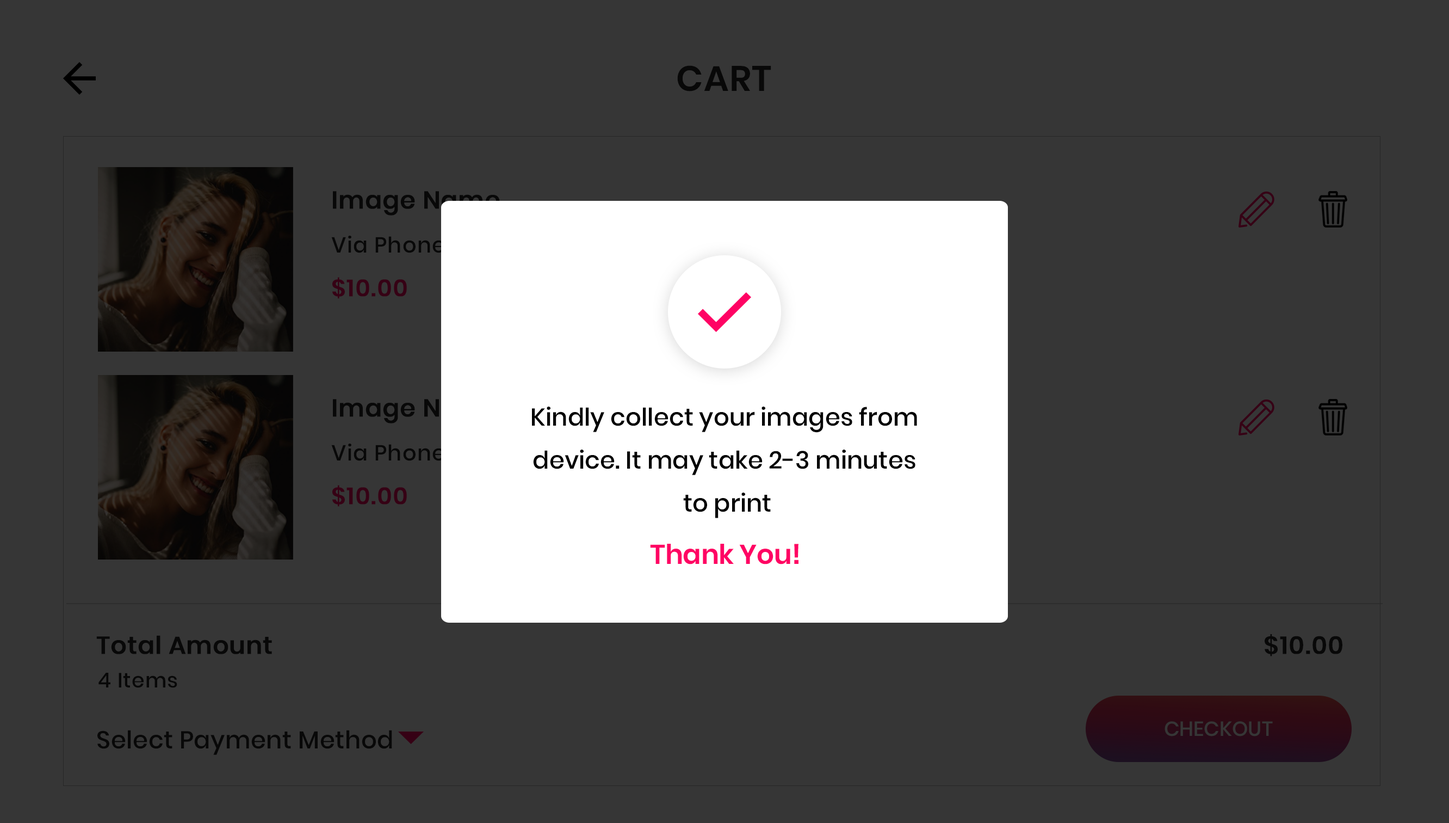
<style>
.page{position:relative;width:1449px;height:823px;background:#363636}
.page>*{position:absolute;margin:0}
.t1{font:35.4px "Poppins-SemiBold";letter-spacing:0.02em;color:#080808;text-transform:uppercase}
.t2{font:21.8px "Poppins-Medium";letter-spacing:0.03em;color:#080808}
.t3{font:23.4px "Poppins-Medium";letter-spacing:0.03em;color:#360115;font-weight:bold}
.t4{font:24.5px/43px "Poppins-Medium";color:#000000}
.t5{font:27.2px "Poppins-SemiBold";letter-spacing:-0.01em;color:#ff0364}
.t6{font:24.5px "Poppins-Medium";letter-spacing:0.01em;color:#080808;font-weight:bold}
.t7{font:24.5px "Poppins-Medium";letter-spacing:0.03em;color:#080808;font-weight:bold}
.t8{font:20.7px "Poppins-Medium";letter-spacing:0.03em;color:#080808}
.t9{font:20.3px "Poppins-Medium";color:#363636;text-transform:uppercase}
.t10{font:24.5px "Poppins-Medium";letter-spacing:0.01em;color:#080808}
</style>
<div class="page">
<p class="t1" style="left:677px;top:65px;width:95px;height:26px">Cart</p>
<p class="t2" style="left:331px;top:236px;width:114px;height:17px">Via Phone</p>
<p class="t3" style="left:332px;top:277px;width:75px;height:22px">$10.00</p>
<p class="t4" style="left:532px;top:406px;width:385px;height:112px;text-align:center">Kindly collect your images from <br>device. It may take 2-3 minutes <br>to print</p>
<p class="t2" style="left:331px;top:443px;width:114px;height:18px">Via Phone</p>
<p class="t3" style="left:332px;top:485px;width:75px;height:22px">$10.00</p>
<p class="t5" style="left:650px;top:544px;width:149px;height:20px">Thank You!</p>
<p class="t6" style="left:96px;top:635px;width:176px;height:19px">Total Amount</p>
<p class="t7" style="left:1265px;top:634px;width:78px;height:22px">$10.00</p>
<p class="t8" style="left:98px;top:673px;width:79px;height:15px">4 Items</p>
<p class="t9" style="left:1165px;top:721px;width:108px;height:15px">checkout</p>
<p class="t10" style="left:97px;top:730px;width:295px;height:25px">Select Payment Method</p>
</div>
